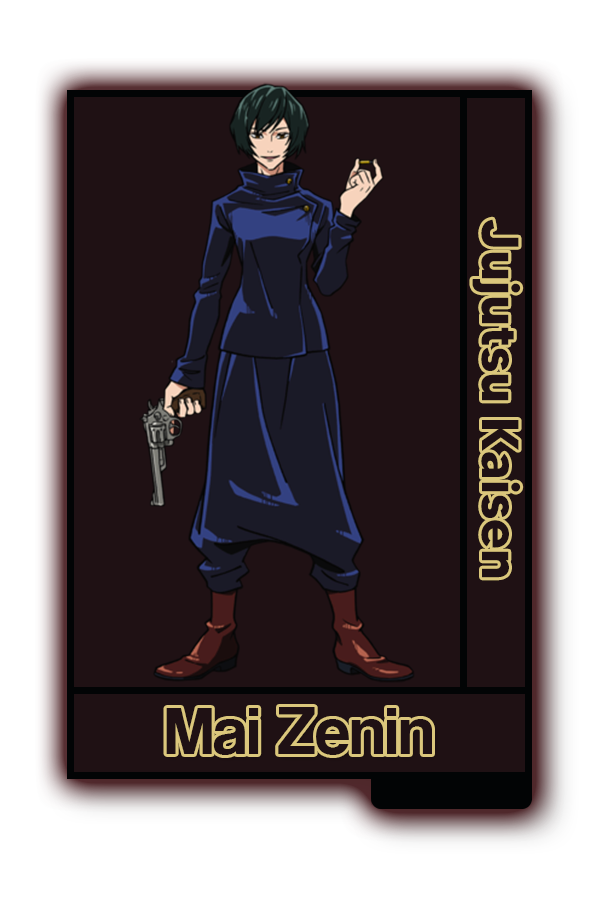
<style>
.page{position:relative;width:600px;height:900px;background:#1f1114}
.page>*{position:absolute;margin:0}
.t1{font:52px "MADETOMMY-Bold";color:#1e1214}
.t2{font:70.1px "CoolveticaRg-Regular";color:#1e1214}
</style>
<div class="page">
<p class="t1" style="left:472px;top:219px;width:49px;height:359px;rotate:90deg">Jujutsu Kaisen</p>
<p class="t2" style="left:166px;top:707px;width:266px;height:48px">Mai Zenin</p>
</div>
